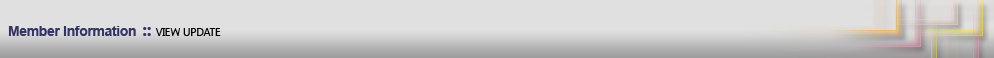
<style>
.page{position:relative;width:994px;height:58px;background:#e1e0e0}
.page>*{position:absolute;margin:0}
.t1{font:14px "Arial-BoldMT";letter-spacing:-0.025em;color:#333366}
.t2{font:18px "SegoeUI-Bold";letter-spacing:-0.025em;color:#333366}
.t3{font:11px "SegoeUI";letter-spacing:-0.025em;color:#010101}
</style>
<div class="page">
<p class="t1" style="left:8px;top:26px;width:213px;height:10px">Member Information <span class="t2">:: </span><span class="t3">VIEW UPDATE</span></p>
</div>
